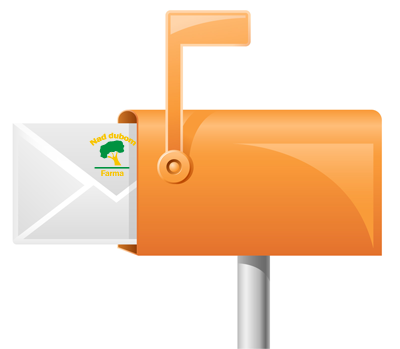
<style>
.page{position:relative;width:400px;height:349px;background:#ffffff}
.page>*{position:absolute;margin:0}
.t1{font:8px/3.5px "FranklinGothic-Demi";letter-spacing:-0.025em;color:#f8c400}
.t2{font:8.7px "FranklinGothic-Demi";letter-spacing:-0.025em;color:#f8c400}
</style>
<div class="page">
<p class="t1" style="left:89px;top:132px;width:47px;height:14px;text-align:center">Nad dubom</p>
<p class="t2" style="left:101px;top:170px;width:23px;height:6px">Farma</p>
</div>
